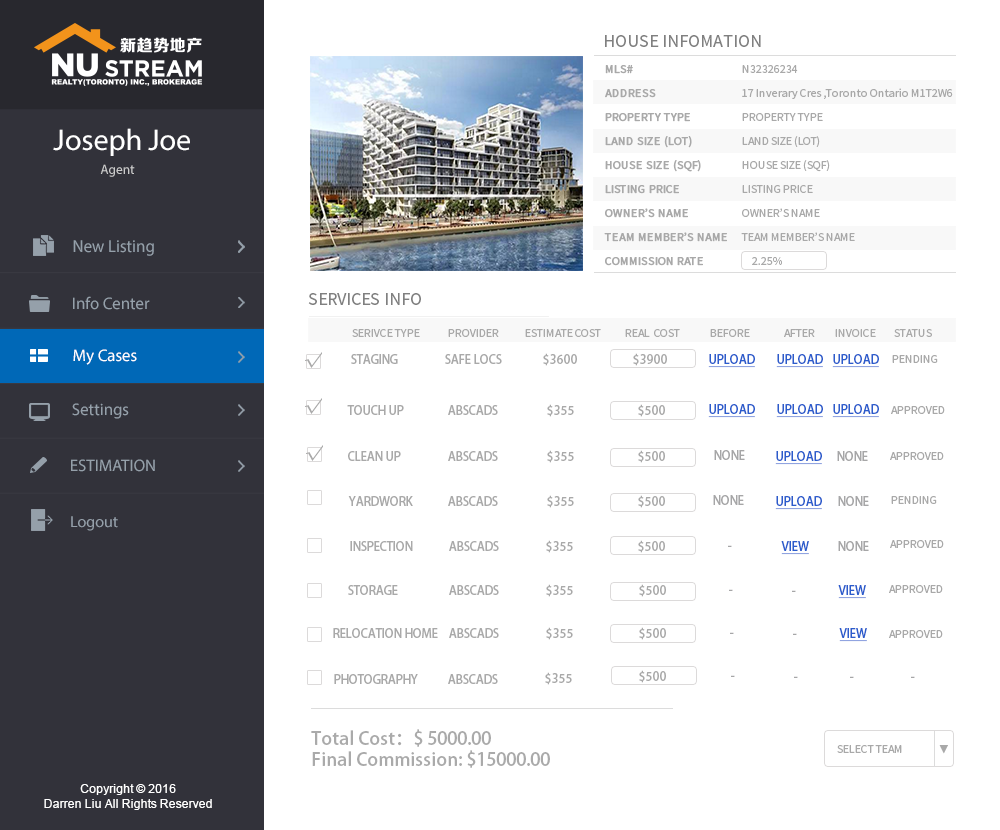
<style>
.page{position:relative;width:1000px;height:830px;background:#ffffff}
.page>*{position:absolute;margin:0}
.t1{font:18px "SourceSansPro-Regular";color:#808080}
.t2{font:12px/24px "SourceSansPro-Regular";color:#a9a9a9;font-weight:bold}
.t3{font:12px/24px "SourceSansPro-Regular";color:#a9a9a9}
.t4{font:30px "MyriadPro-Regular";color:#ffffff}
.t5{font:13.4px "MyriadPro-Regular";color:#cccccc}
.t6{font:17.6px "MyriadPro-Regular";color:#95a0aa;scale:0.96 1}
.t7{font:16.8px "MyriadPro-Regular";color:#95a0aa}
.t8{font:12px "SourceSansPro-Regular";color:#a9a9a9}
.t9{font:16.8px "MyriadPro-Regular";color:#ffffff}
.t10{font:18px "MyriadPro-Regular";color:#a9a9a9}
.t11{font:12px "AdobeHeitiStd-Regular";color:#a9a9a9}
.t12{font:12px "AdobeHeitiStd-Regular";color:#2b5ccc;text-decoration:underline}
.t13{font:12px "AdobeHeitiStd-Regular";color:#a6a6a7}
.t14{font:16px "MyriadPro-Regular";color:#95a0aa}
.t15{font:18px "AdobeHeitiStd-Regular";color:#a9a9a9}
.t16{font:10px "AdobeHeitiStd-Regular";color:#a9a9a9}
.t17{font:12px "ArialMT";color:#ffffff}
</style>
<div class="page">
<p class="t1" style="left:605px;top:35px;width:156px;height:12px">HOUSE INFOMATION</p>
<p class="t2" style="left:604px;top:65px;width:123px;height:201px">MLS# <br>ADDRESS<br>PROPERTY TYPE<br>LAND SIZE (LOT)<br>HOUSE SIZE (SQF)<br>LISTING PRICE<br>OWNER’S NAME<br>TEAM MEMBER’S NAME<br>COMMISSION RATE</p>
<p class="t3" style="left:741px;top:65px;width:212px;height:200px">N32326234<br>17 Inverary Cres ,Toronto Ontario M1T2W6<br>PROPERTY TYPE<br>LAND SIZE (LOT)<br>HOUSE SIZE (SQF)<br>LISTING PRICE<br>OWNER’S NAME<br>TEAM MEMBER’S NAME<br>     2.25%</p>
<p class="t4" style="left:53px;top:128px;width:137px;height:28px">Joseph Joe</p>
<p class="t5" style="left:100px;top:164px;width:35px;height:13px">Agent</p>
<p class="t6" style="left:73px;top:240px;width:81px;height:16px">New Listing</p>
<p class="t1" style="left:308px;top:293px;width:113px;height:12px">SERVICES INFO</p>
<p class="t7" style="left:73px;top:296px;width:77px;height:14px">Info Center</p>
<p class="t8" style="left:352px;top:329px;width:580px;height:8px">SERIVCE TYPE              PROVIDER             ESTIMATE COST            REAL  COST               BEFORE                 AFTER          INVOICE         STATUS</p>
<p class="t9" style="left:73px;top:349px;width:64px;height:16px">My Cases</p>
<p class="t10" style="left:305px;top:352px;width:17px;height:16px">√</p>
<p class="t11" style="left:543px;top:353px;width:34px;height:13px">$3600</p>
<p class="t11" style="left:633px;top:353px;width:34px;height:13px">$3900</p>
<p class="t11" style="left:351px;top:354px;width:47px;height:10px">STAGING</p>
<p class="t11" style="left:445px;top:354px;width:57px;height:10px">SAFE LOCS</p>
<p class="t12" style="left:708px;top:354px;width:47px;height:14px">UPLOAD</p>
<p class="t12" style="left:776px;top:354px;width:47px;height:14px">UPLOAD</p>
<p class="t12" style="left:832px;top:354px;width:47px;height:14px">UPLOAD</p>
<p class="t8" style="left:892px;top:355px;width:46px;height:8px">PENDING</p>
<p class="t10" style="left:305px;top:398px;width:17px;height:16px">√</p>
<p class="t7" style="left:72px;top:403px;width:57px;height:16px">Settings</p>
<p class="t11" style="left:347px;top:405px;width:57px;height:10px">TOUCH UP</p>
<p class="t11" style="left:448px;top:405px;width:50px;height:10px">ABSCADS</p>
<p class="t11" style="left:547px;top:404px;width:27px;height:13px">$355</p>
<p class="t11" style="left:638px;top:404px;width:27px;height:13px">$500</p>
<p class="t12" style="left:708px;top:404px;width:47px;height:14px">UPLOAD</p>
<p class="t12" style="left:776px;top:404px;width:47px;height:14px">UPLOAD</p>
<p class="t12" style="left:832px;top:404px;width:47px;height:14px">UPLOAD</p>
<p class="t8" style="left:891px;top:406px;width:54px;height:8px">APPROVED</p>
<p class="t10" style="left:306px;top:445px;width:17px;height:16px">√</p>
<p class="t7" style="left:71px;top:459px;width:84px;height:13px">ESTIMATION</p>
<p class="t11" style="left:348px;top:451px;width:53px;height:10px">CLEAN UP</p>
<p class="t11" style="left:448px;top:451px;width:50px;height:10px">ABSCADS</p>
<p class="t11" style="left:547px;top:450px;width:27px;height:13px">$355</p>
<p class="t11" style="left:638px;top:450px;width:27px;height:13px">$500</p>
<p class="t13" style="left:714px;top:450px;width:31px;height:10px">NONE</p>
<p class="t12" style="left:775px;top:451px;width:47px;height:14px">UPLOAD</p>
<p class="t13" style="left:837px;top:451px;width:31px;height:10px">NONE</p>
<p class="t8" style="left:890px;top:452px;width:54px;height:8px">APPROVED</p>
<p class="t11" style="left:348px;top:496px;width:65px;height:10px">YARDWORK</p>
<p class="t11" style="left:448px;top:496px;width:50px;height:10px">ABSCADS</p>
<p class="t11" style="left:547px;top:495px;width:27px;height:13px">$355</p>
<p class="t11" style="left:638px;top:495px;width:27px;height:13px">$500</p>
<p class="t13" style="left:713px;top:495px;width:31px;height:10px">NONE</p>
<p class="t12" style="left:775px;top:496px;width:47px;height:14px">UPLOAD</p>
<p class="t13" style="left:838px;top:496px;width:31px;height:10px">NONE</p>
<p class="t8" style="left:891px;top:496px;width:46px;height:8px">PENDING</p>
<p class="t14" style="left:71px;top:516px;width:47px;height:15px">Logout</p>
<p class="t11" style="left:350px;top:541px;width:63px;height:10px">INSPECTION</p>
<p class="t11" style="left:449px;top:541px;width:50px;height:10px">ABSCADS</p>
<p class="t11" style="left:546px;top:540px;width:27px;height:13px">$355</p>
<p class="t11" style="left:638px;top:540px;width:27px;height:13px">$500</p>
<p class="t13" style="left:728px;top:545px;width:4px;height:2px">-</p>
<p class="t12" style="left:781px;top:541px;width:28px;height:14px">VIEW</p>
<p class="t13" style="left:838px;top:541px;width:31px;height:10px">NONE</p>
<p class="t8" style="left:890px;top:540px;width:54px;height:8px">APPROVED</p>
<p class="t11" style="left:348px;top:585px;width:50px;height:10px">STORAGE</p>
<p class="t11" style="left:449px;top:585px;width:50px;height:10px">ABSCADS</p>
<p class="t11" style="left:546px;top:584px;width:27px;height:13px">$355</p>
<p class="t11" style="left:639px;top:584px;width:27px;height:13px">$500</p>
<p class="t13" style="left:729px;top:589px;width:4px;height:2px">-</p>
<p class="t13" style="left:792px;top:590px;width:4px;height:2px">-</p>
<p class="t12" style="left:838px;top:585px;width:28px;height:14px">VIEW</p>
<p class="t8" style="left:889px;top:585px;width:54px;height:8px">APPROVED</p>
<p class="t11" style="left:333px;top:628px;width:105px;height:10px">RELOCATION HOME</p>
<p class="t11" style="left:449px;top:628px;width:50px;height:10px">ABSCADS</p>
<p class="t11" style="left:546px;top:627px;width:27px;height:13px">$355</p>
<p class="t11" style="left:639px;top:627px;width:27px;height:13px">$500</p>
<p class="t12" style="left:839px;top:628px;width:28px;height:14px">VIEW</p>
<p class="t8" style="left:889px;top:630px;width:54px;height:8px">APPROVED</p>
<p class="t13" style="left:730px;top:632px;width:4px;height:2px">-</p>
<p class="t13" style="left:793px;top:633px;width:4px;height:2px">-</p>
<p class="t11" style="left:334px;top:674px;width:84px;height:10px">PHOTOGRAPHY</p>
<p class="t11" style="left:448px;top:674px;width:50px;height:10px">ABSCADS</p>
<p class="t11" style="left:545px;top:672px;width:27px;height:13px">$355</p>
<p class="t11" style="left:639px;top:670px;width:27px;height:13px">$500</p>
<p class="t13" style="left:731px;top:675px;width:4px;height:2px">-</p>
<p class="t13" style="left:794px;top:676px;width:4px;height:2px">-</p>
<p class="t13" style="left:850px;top:676px;width:4px;height:2px">-</p>
<p class="t13" style="left:911px;top:676px;width:4px;height:2px">-</p>
<p class="t15" style="left:311px;top:729px;width:239px;height:39px">Total Cost：$ 5000.00<br>Final Commission: $15000.00</p>
<p class="t8" style="left:837px;top:745px;width:65px;height:8px">SELECT TEAM</p>
<p class="t16" style="left:939px;top:745px;width:9px;height:9px">▼</p>
<p class="t17" style="left:44px;top:784px;width:168px;height:26px;text-align:center">Copyright © 2016<br>Darren Liu All Rights Reserved</p>
</div>
